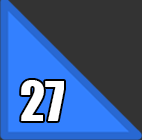
<style>
.page{position:relative;width:142px;height:140px;background:#333333}
.page>*{position:absolute;margin:0}
.t1{font:50px "Impact";color:#ffffff}
</style>
<div class="page">
<p class="t1" style="left:21px;top:80px;width:43px;height:41px">27</p>
</div>
